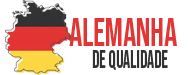
<style>
.page{position:relative;width:188px;height:75px;background:#ffffff}
.page>*{position:absolute;margin:0}
.t1{font:39.8px "BebasNeue-Regular";color:#e23534;scale:0.83 1}
.t2{font:25.7px "BebasNeue-Regular";color:#323232;scale:0.7 1}
</style>
<div class="page">
<p class="t1" style="left:69px;top:18px;width:108px;height:28px">Alemanha</p>
<p class="t2" style="left:92px;top:50px;width:76px;height:20px">de qualidade</p>
</div>
